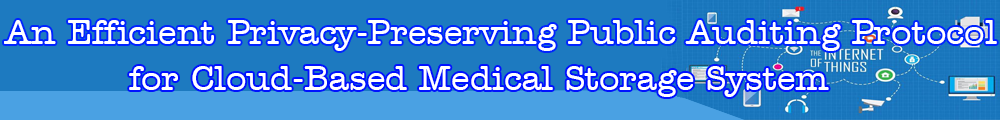
<style>
.page{position:relative;width:1000px;height:120px;background:#1d7ac0}
.page>*{position:absolute;margin:0}
.t1{font:36px "AmerTypewriterITCbyBT-Medium";color:#ffffff}
</style>
<div class="page">
<p class="t1" style="left:4px;top:20px;width:993px;height:31px">An Efficient Privacy-Preserving Public Auditing Protocol</p>
<p class="t1" style="left:129px;top:66px;width:700px;height:31px">for Cloud-Based Medical Storage System</p>
</div>
